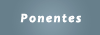
<style>
.page{position:relative;width:100px;height:35px;background:#677f8b}
.page>*{position:absolute;margin:0}
.t1{font:12.5px "Candara-BoldItalic";letter-spacing:0.11em;color:#ffffff;font-weight:bold}
</style>
<div class="page">
<p class="t1" style="left:20px;top:13px;width:61px;height:10px">Ponentes</p>
</div>
